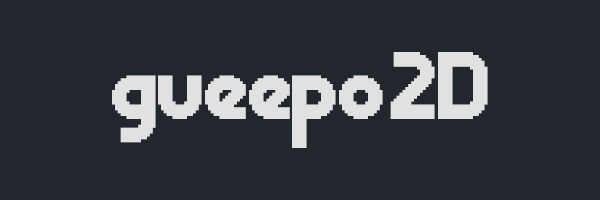
<style>
.page{position:relative;width:600px;height:200px;background:#22272e}
.page>*{position:absolute;margin:0}
.t1{font:96px "ChevyRay---Roundabout";color:#e1e1e1}
</style>
<div class="page">
<p class="t1" style="left:112px;top:52px;width:376px;height:96px">gueepo2D</p>
</div>
